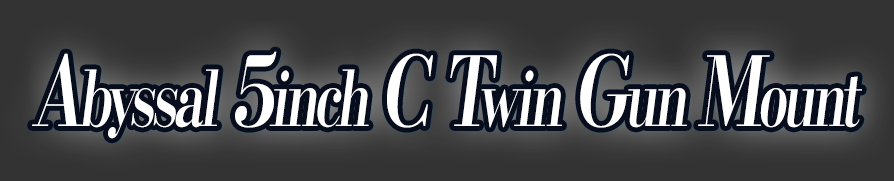
<style>
.page{position:relative;width:894px;height:181px;background:#333333}
.page>*{position:absolute;margin:0}
.t1{font:76.8px "KochoStd-Heavy";letter-spacing:-0.08em;color:#ffffff;font-style:italic;scale:0.72 1}
.t2{font:96px "KochoStd-Heavy";letter-spacing:-0.08em;color:#ffffff;font-style:italic;scale:0.72 1}
</style>
<div class="page">
<p class="t1" style="left:32px;top:51px;width:830px;height:88px"><span class="t2">A</span>byssal<span class="t2"> 5</span>inch <span class="t2">C T</span>win <span class="t2">G</span>un <span class="t2">M</span>ount</p>
</div>
